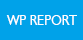
<style>
.page{position:relative;width:83px;height:40px;background:#00a2e9}
.page>*{position:absolute;margin:0}
.t1{font:14.9px "Humanist521BT-Roman";color:#fefefe;scale:0.88 1}
</style>
<div class="page">
<p class="t1" style="left:6px;top:15px;width:71px;height:10px">WP REPORT</p>
</div>
